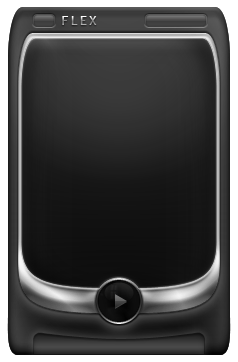
<style>
.page{position:relative;width:238px;height:362px}
.page>*{position:absolute;margin:0}
.t1{font:12px "TrebuchetMS-Bold";letter-spacing:0.2em}
</style>
<div class="page">
<p class="t1" style="left:62px;top:16px;width:35px;height:9px">FLEX</p>
</div>
